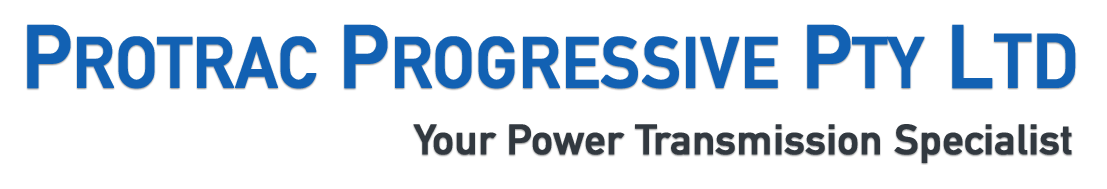
<style>
.page{position:relative;width:1107px;height:189px;background:#ffffff}
.page>*{position:absolute;margin:0}
.t1{font:70.8px "DINAlternate-Bold";color:#1261b3;font-weight:bold;scale:0.95 1}
.t2{font:87.5px "DINAlternate-Bold";color:#1261b3;font-weight:bold;scale:0.95 1}
.t3{font:75px "DINAlternate-Bold";color:#1261b3;font-weight:bold;scale:0.95 1}
.t4{font:41.7px "DINAlternate-Bold";color:#323940;font-weight:bold}
</style>
<div class="page">
<p class="t1" style="left:27px;top:24px;width:1049px;height:65px"><span class="t2">P</span>ROTRAC<span class="t2"> P</span>ROGRESSIVE<span class="t2"> P</span>TY<span class="t2"> L</span><span class="t3">TD</span></p>
<p class="t4" style="left:413px;top:124px;width:659px;height:39px">Your Power Transmission Specialist</p>
</div>
